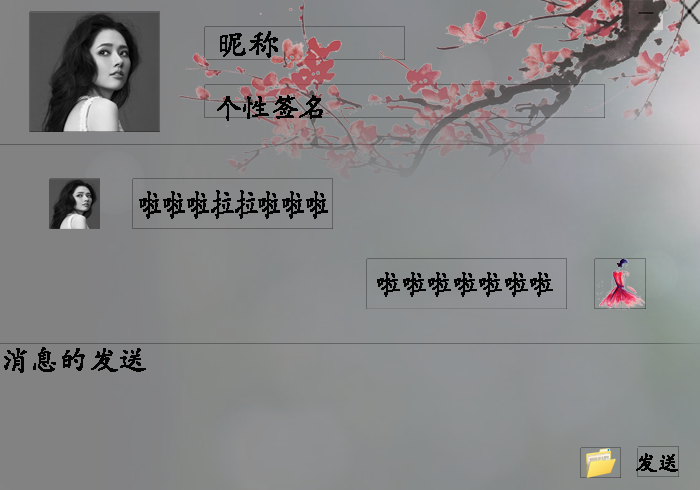
<style>
.page{position:relative;width:700px;height:490px}
.page>*{position:absolute;margin:0}
.t1{font:31.1px "STKaiti";color:#030303;font-weight:bold}
.t2{font:27.6px "STKaiti";color:#030303;font-weight:bold}
.t3{font:33px "STKaiti";color:#030303;font-weight:bold;scale:0.71 1}
.t4{font:29.4px "STKaiti";color:#030303;font-weight:bold;scale:0.86 1}
.t5{font:27.6px "STKaiti";color:#030303;font-weight:bold;scale:1.04 1}
.t6{font:21.4px "STKaiti";color:#030303;font-weight:bold}
</style>
<div class="page">
<p class="t1" style="left:220px;top:31px;width:58px;height:27px">昵称</p>
<p class="t2" style="left:217px;top:95px;width:106px;height:26px">个性签名</p>
<p class="t3" style="left:139px;top:190px;width:189px;height:29px">啦啦啦拉拉啦啦啦</p>
<p class="t4" style="left:377px;top:272px;width:176px;height:25px">啦啦啦啦啦啦啦</p>
<p class="t5" style="left:4px;top:347px;width:142px;height:26px">消息的发送</p>
<p class="t6" style="left:636px;top:453px;width:42px;height:19px">发送</p>
</div>
